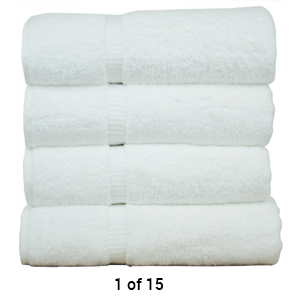
<style>
.page{position:relative;width:300px;height:300px;background:#ffffff}
.page>*{position:absolute;margin:0}
.t1{font:16px "Roboto-Medium";color:#000000}
</style>
<div class="page">
<p class="t1" style="left:115px;top:278px;width:49px;height:12px">1 of 15</p>
</div>
